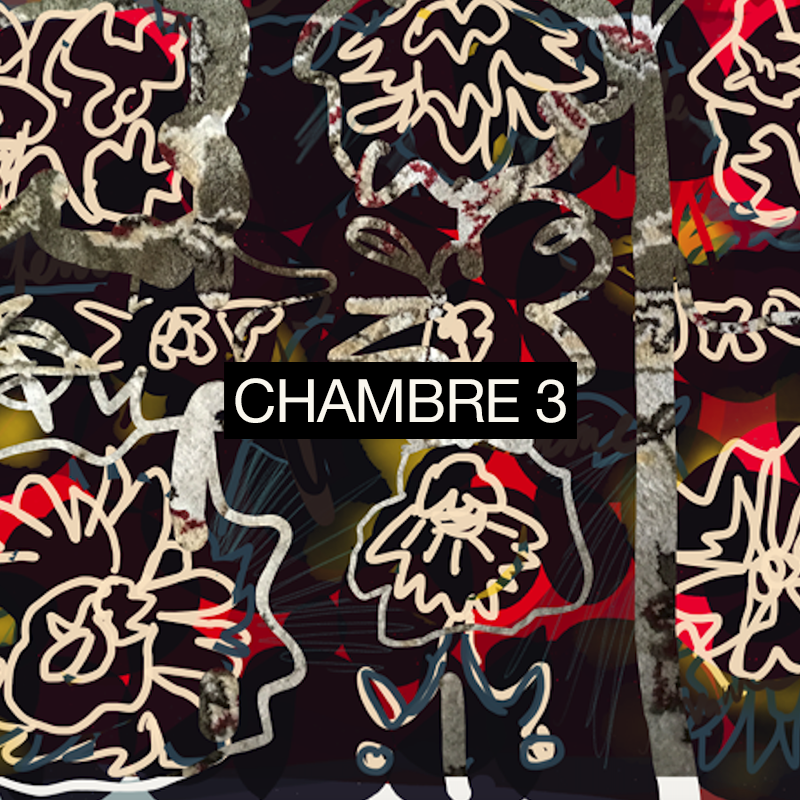
<style>
.page{position:relative;width:800px;height:800px}
.page>*{position:absolute;margin:0}
.t1{font:60px "HelveticaNeue";letter-spacing:-0.025em;color:#faf7ee}
</style>
<div class="page">
<p class="t1" style="left:235px;top:378px;width:331px;height:45px">CHAMBRE 3</p>
</div>
